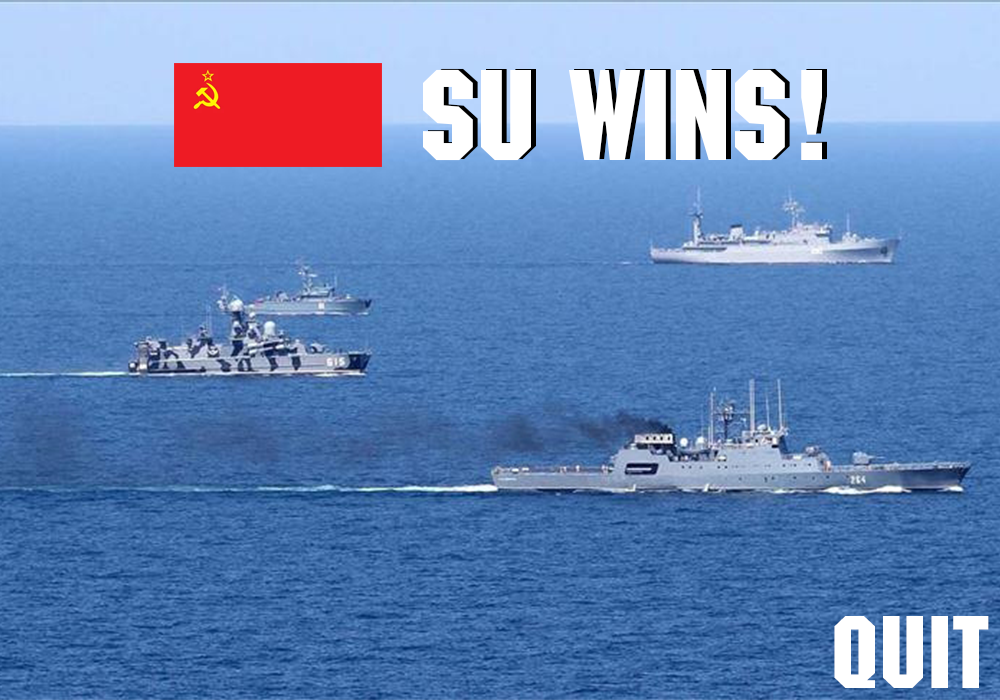
<style>
.page{position:relative;width:1000px;height:700px}
.page>*{position:absolute;margin:0}
.t1{font:125px "MachineStd";color:#ffffff}
.t2{font:100px "MachineStd";color:#ffffff}
</style>
<div class="page">
<p class="t1" style="left:423px;top:69px;width:399px;height:92px">SU WINS!</p>
<p class="t2" style="left:834px;top:616px;width:155px;height:72px">QUIT</p>
</div>
